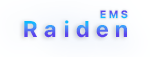
<style>
.page{position:relative;width:150px;height:57px}
.page>*{position:absolute;margin:0}
.t1{font:10.5px "SFProDisplay-Bold";letter-spacing:0.3em}
.t2{font:22.6px "SFProDisplay-Bold";letter-spacing:0.3em}
</style>
<div class="page">
<p class="t1" style="left:100px;top:10px;width:28px;height:9px">EMS</p>
<p class="t2" style="left:24px;top:20px;width:103px;height:18px">Raiden</p>
</div>
